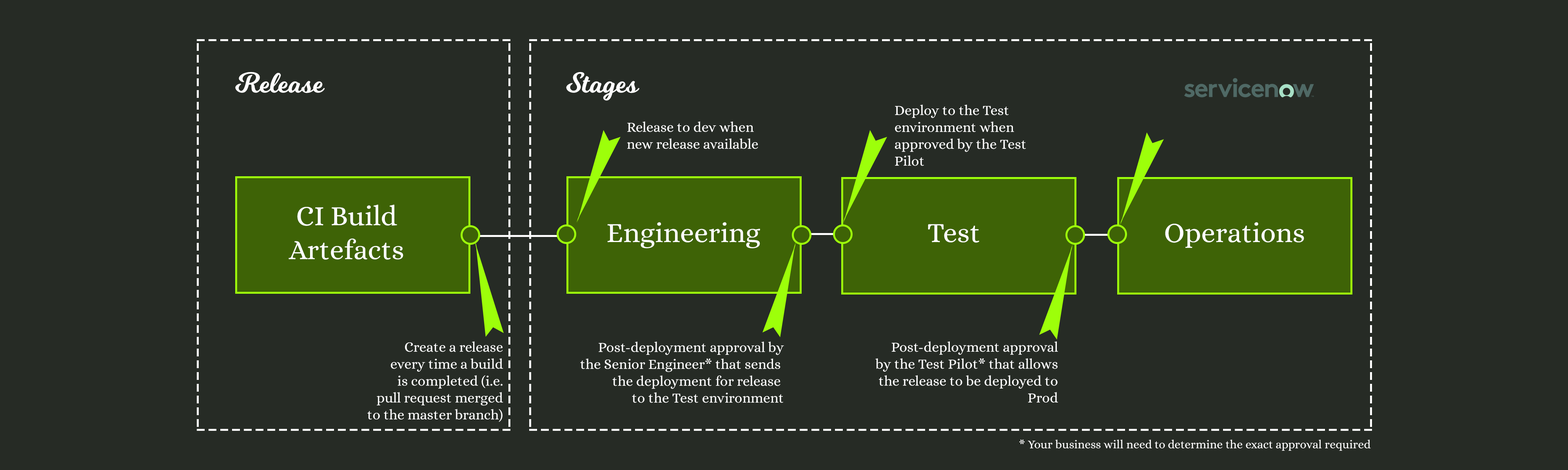
<style>
.page{position:relative;width:1568px;height:470px;background:#262b25}
.page>*{position:absolute;margin:0}
.t1{font:28.2px "Milkshake";color:#ffffff}
.t2{font:14.1px "Alice-Regular";color:#ffffff}
.t3{font:28.2px "Alice-Regular";color:#ffffff}
.t4{font:11.8px "Alice-Regular";color:#ffffff}
</style>
<div class="page">
<p class="t1" style="left:235px;top:72px;width:90px;height:21px">Release</p>
<p class="t1" style="left:566px;top:72px;width:73px;height:29px">Stages</p>
<p class="t2" style="left:895px;top:105px;width:131px;height:61px">Deploy to the Test<br>environment when <br>approved by the Test<br>Pilot</p>
<p class="t2" style="left:627px;top:122px;width:131px;height:27px">Release to dev when<br>new release available</p>
<p class="t3" style="left:289px;top:205px;width:114px;height:55px;text-align:center">CI Build<br>Artefacts</p>
<p class="t3" style="left:607px;top:222px;width:153px;height:27px">Engineering</p>
<p class="t3" style="left:928px;top:224px;width:51px;height:19px">Test</p>
<p class="t3" style="left:1165px;top:222px;width:139px;height:26px">Operations</p>
<p class="t2" style="left:367px;top:341px;width:136px;height:81px;text-align:right">Create a release<br>every time a build<br>is completed (i.e.<br>pull request merged<br>to the master branch)</p>
<p class="t2" style="left:580px;top:342px;width:204px;height:61px;text-align:right">Post-deployment approval by<br>the Senior Engineer* that sends <br>the deployment for release <br>to the Test environment</p>
<p class="t2" style="left:875px;top:341px;width:183px;height:62px;text-align:right">Post-deployment approval<br>by the Test Pilot* that allows<br>the release to be deployed to<br>Prod</p>
<p class="t4" style="left:1019px;top:440px;width:352px;height:11px">* Your business will need to determine the exact approval required</p>
</div>
